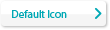
<style>
.page{position:relative;width:110px;height:30px;background:#ffffff}
.page>*{position:absolute;margin:0}
.t1{font:11px "MyriadPro-Regular";color:#00a8b5}
</style>
<div class="page">
<p class="t1" style="left:12px;top:10px;width:55px;height:8px">Default Icon</p>
</div>
